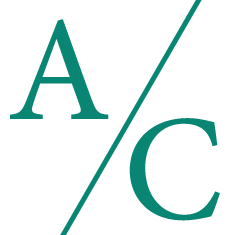
<style>
.page{position:relative;width:235px;height:235px;background:#ffffff}
.page>*{position:absolute;margin:0}
.t1{font:150px "MinionPro-Regular";color:#088573}
</style>
<div class="page">
<p class="t1" style="left:10px;top:19px;width:99px;height:100px">A</p>
<p class="t1" style="left:129px;top:118px;width:91px;height:103px">C</p>
</div>
